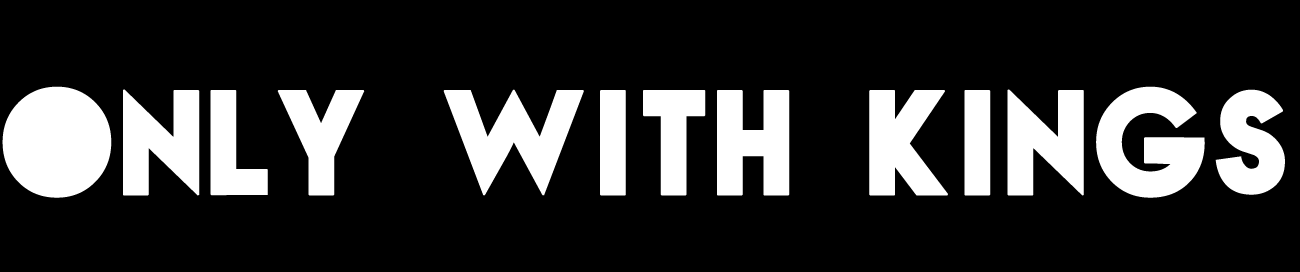
<style>
.page{position:relative;width:1300px;height:272px;background:#000000}
.page>*{position:absolute;margin:0}
.t1{font:183.6px "NovaSOLID-SOLID";letter-spacing:0.075em;color:#ffffff;font-weight:bold}
</style>
<div class="page">
<p class="t1" style="left:2px;top:86px;width:1283px;height:112px">Only with kings</p>
</div>
